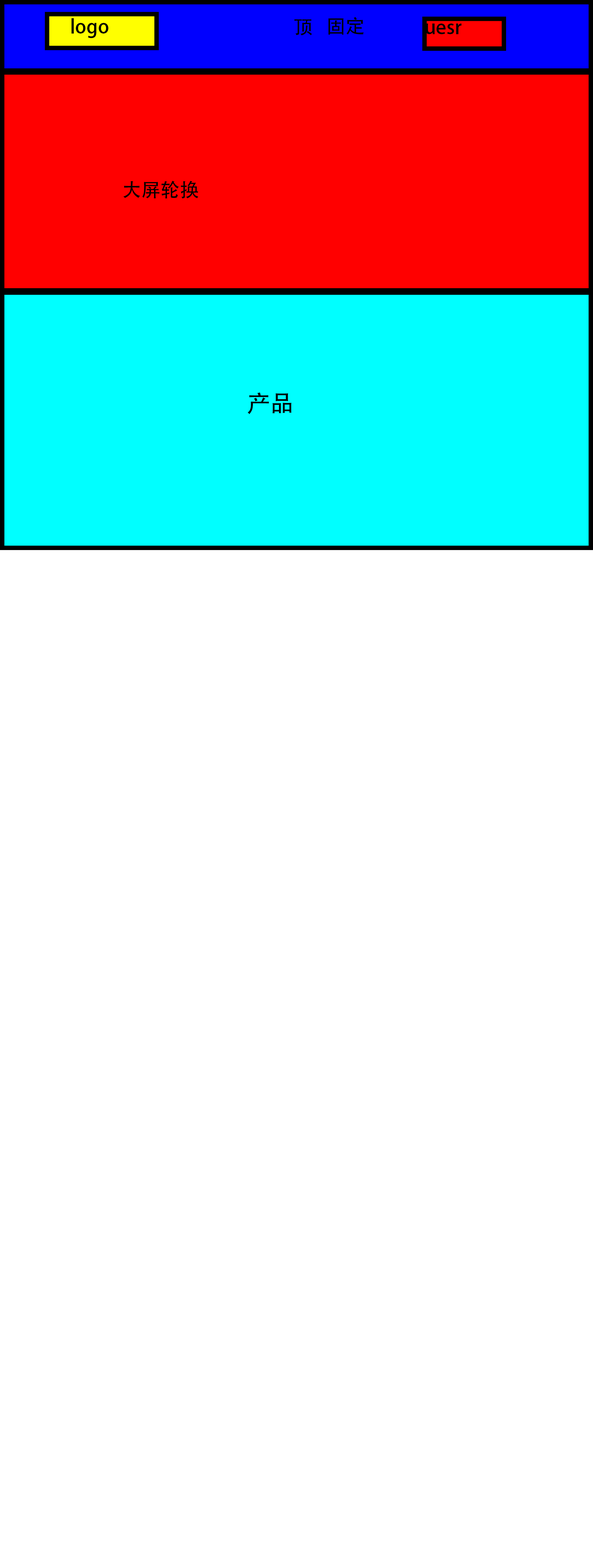
<style>
.page{position:relative;width:593px;height:1568px;background:#ffffff}
.page>*{position:absolute;margin:0}
.t1{font:19.2px "AdobeHeitiStd-Regular";color:#000000}
.t2{font:23.5px "AdobeHeitiStd-Regular";color:#000000}
</style>
<div class="page">
<p class="t1" style="left:328px;top:17px;width:35px;height:18px">固定</p>
<p class="t1" style="left:72px;top:18px;width:37px;height:20px">logo</p>
<p class="t1" style="left:294px;top:19px;width:18px;height:16px">顶</p>
<p class="t1" style="left:426px;top:24px;width:35px;height:10px">uesr</p>
<p class="t1" style="left:123px;top:181px;width:75px;height:18px">大屏轮换</p>
<p class="t2" style="left:247px;top:392px;width:44px;height:22px">产品</p>
</div>
